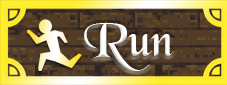
<style>
.page{position:relative;width:227px;height:85px}
.page>*{position:absolute;margin:0}
.t1{font:48px "BlackChancery";color:#ffffff}
</style>
<div class="page">
<p class="t1" style="left:84px;top:22px;width:89px;height:49px">Run</p>
</div>
